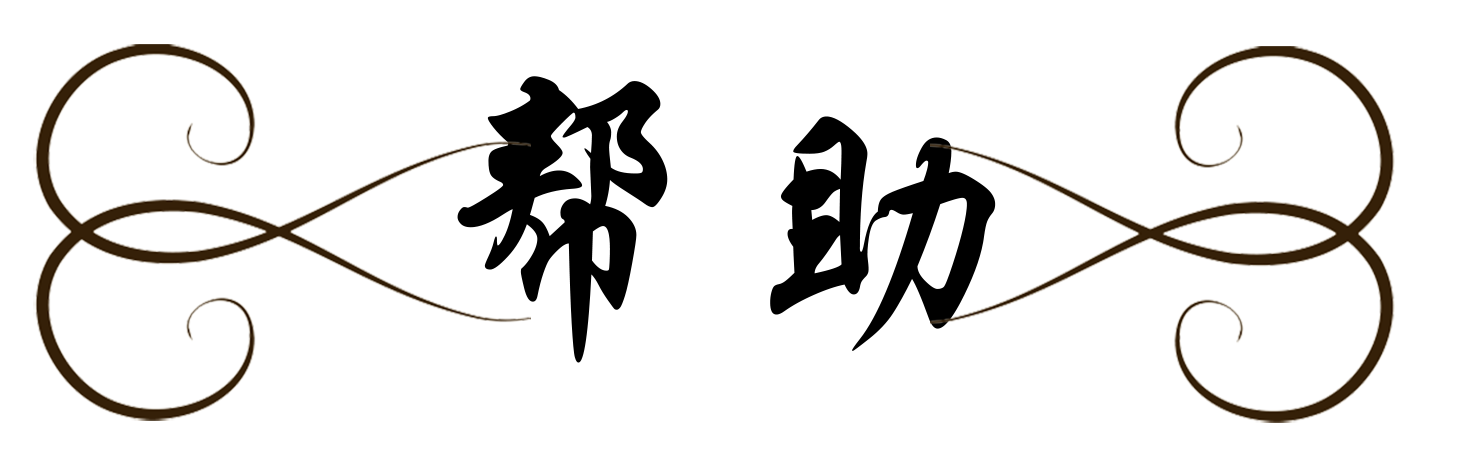
<style>
.page{position:relative;width:1467px;height:467px;background:#ffffff}
.page>*{position:absolute;margin:0}
.t1{font:300px "STXingkai";color:#000000}
</style>
<div class="page">
<p class="t1" style="left:457px;top:76px;width:539px;height:287px">帮助</p>
</div>
